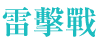
<style>
.page{position:relative;width:97px;height:46px;background:#ffffff}
.page>*{position:absolute;margin:0}
.t1{font:32px "RyuminPro-ExBold";color:#1dbdc0}
</style>
<div class="page">
<p class="t1" style="left:2px;top:7px;width:94px;height:30px">雷擊戰</p>
</div>
